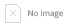
<style>
.page{position:relative;width:71px;height:27px;background:#ffffff}
.page>*{position:absolute;margin:0}
.t1{font:8px "OpenSans";color:#898989}
</style>
<div class="page">
<p class="t1" style="left:28px;top:10px;width:35px;height:9px">No image</p>
</div>
